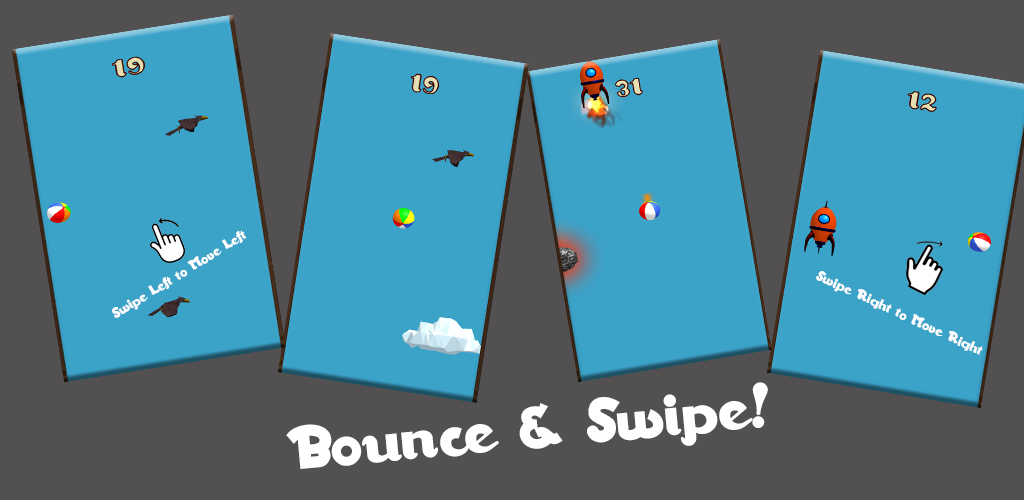
<style>
.page{position:relative;width:1024px;height:500px;background:#3ba2c8}
.page>*{position:absolute;margin:0}
.t1{font:14px "WalrusGumbo";color:#ffffff}
.t2{font:60px "WalrusGumbo";color:#ffffff}
</style>
<div class="page">
<p class="t1" style="left:112px;top:230px;width:135px;height:88px;rotate:-32deg">Swipe Left to Move Left</p>
<p class="t1" style="left:816px;top:271px;width:167px;height:84px;rotate:25deg">Swipe Right to Move Right</p>
<p class="t2" style="left:286px;top:382px;width:482px;height:87px;rotate:-5deg">Bounce &amp; Swipe!</p>
</div>
